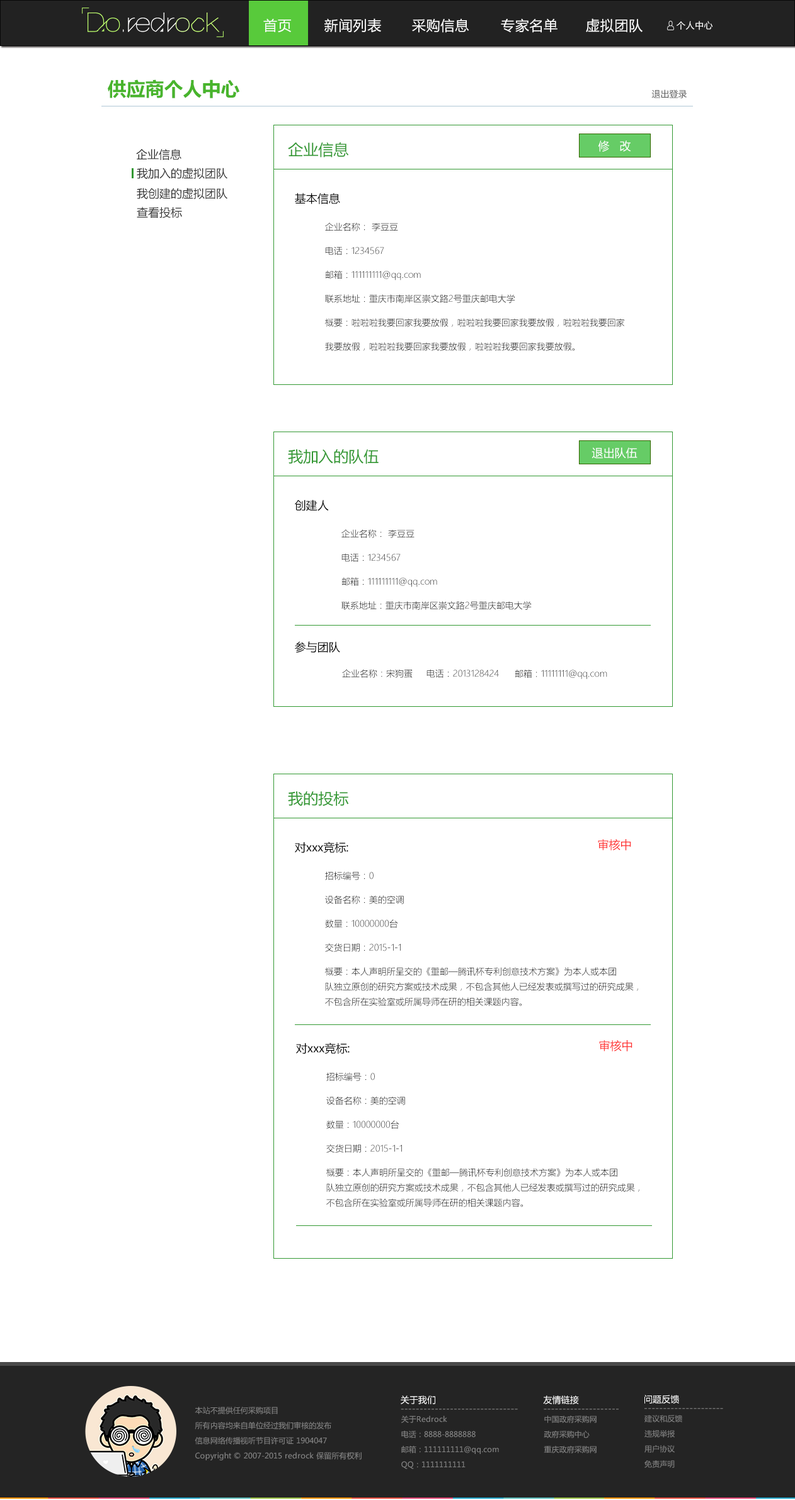
<style>
.page{position:relative;width:795px;height:1500px;background:#ffffff}
.page>*{position:absolute;margin:0}
.t1{font:13.9px "MicrosoftYaHei";letter-spacing:0.035em;color:#ffffff}
.t2{font:8.8px "MicrosoftYaHei";letter-spacing:0.035em;color:#ffffff}
.t3{font:18.9px "MicrosoftYaHei-Bold";color:#48b42c}
.t4{font:8.8px "MicrosoftYaHei";color:#5b5b5b}
.t5{font:11.3px "MicrosoftYaHei";color:#333333}
.t6{font:15.1px "MicrosoftYaHei";color:#339933}
.t7{font:11.3px "MicrosoftYaHei";color:#ffffff}
.t8{font:11.3px "MicrosoftYaHei";color:#000000}
.t9{font:8.8px/23.9px "MicrosoftYaHeiLight";color:#000000}
.t10{font:8.8px "MicrosoftYaHeiLight"}
.t11{font:11.3px "MicrosoftYaHei";color:#ff3333}
.t12{font:8.8px/15.1px "MicrosoftYaHeiLight";color:#000000}
.t13{font:8.8px "MicrosoftYaHei";color:#ffffff}
.t14{font:7.6px/15.1px "MicrosoftYaHei";color:#858585}
.t15{font:8.8px "MicrosoftYaHei";color:#858585}
</style>
<div class="page">
<p class="t1" style="left:263px;top:18px;width:28px;height:15px">首页</p>
<p class="t1" style="left:324px;top:18px;width:57px;height:15px">新闻列表</p>
<p class="t1" style="left:412px;top:18px;width:57px;height:15px">采购信息</p>
<p class="t1" style="left:501px;top:18px;width:57px;height:15px">专家名单</p>
<p class="t1" style="left:586px;top:18px;width:57px;height:15px">虚拟团队</p>
<p class="t2" style="left:677px;top:21px;width:36px;height:9px">个人中心</p>
<p class="t3" style="left:108px;top:79px;width:131px;height:19px">供应商个人中心</p>
<p class="t4" style="left:651px;top:89px;width:36px;height:9px">退出登录</p>
<p class="t5" style="left:136px;top:149px;width:45px;height:11px">企业信息</p>
<p class="t6" style="left:288px;top:142px;width:61px;height:15px">企业信息</p>
<p class="t7" style="left:598px;top:140px;width:33px;height:12px">修   改</p>
<p class="t5" style="left:137px;top:168px;width:90px;height:11px">我加入的虚拟团队</p>
<p class="t5" style="left:137px;top:188px;width:90px;height:11px">我创建的虚拟团队</p>
<p class="t8" style="left:295px;top:193px;width:45px;height:11px">基本信息</p>
<p class="t5" style="left:137px;top:207px;width:45px;height:11px">查看投标</p>
<p class="t9" style="left:325px;top:222px;width:299px;height:129px">企业名称： 李豆豆<br>电话：1234567<br>邮箱：111111111@qq.com<br>联系地址：重庆市南岸区崇文路2号重庆邮电大学<br>概要：啦啦啦我要回家我要放假，啦啦啦我要回家我要放假，啦啦啦我要回家<br>我要放假，啦啦啦我要回家我要放假，啦啦啦我要回家我要放假。</p>
<p class="t6" style="left:288px;top:449px;width:91px;height:15px">我加入的队伍</p>
<p class="t7" style="left:592px;top:447px;width:46px;height:12px">退出队伍</p>
<p class="t8" style="left:295px;top:500px;width:34px;height:11px">创建人</p>
<p class="t9" style="left:341px;top:529px;width:191px;height:81px">企业名称： 李豆豆<br>电话：1234567<br>邮箱：111111111@qq.com<br>联系地址：重庆市南岸区崇文路2号重庆邮电大学</p>
<p class="t8" style="left:295px;top:641px;width:45px;height:12px">参与团队</p>
<p class="t10" style="left:342px;top:669px;width:71px;height:9px">企业名称：宋狗蛋</p>
<p class="t10" style="left:426px;top:669px;width:73px;height:9px">电话：2013128424</p>
<p class="t10" style="left:515px;top:669px;width:92px;height:10px">邮箱：11111111@qq.com</p>
<p class="t6" style="left:288px;top:791px;width:61px;height:15px">我的投标</p>
<p class="t8" style="left:295px;top:842px;width:53px;height:11px">对xxx竞标:</p>
<p class="t11" style="left:598px;top:839px;width:33px;height:11px">审核中</p>
<p class="t12" style="left:325px;top:871px;width:313px;height:135px"><span class="t9">招标编号：0<br>设备名称：美的空调<br>数量：10000000台<br>交货日期：2015-1-1<br></span>概要：本人声明所呈交的《重邮—腾讯杯专利创意技术方案》为本人或本团<br>队独立原创的研究方案或技术成果，不包含其他人已经发表或撰写过的研究成果，<br>不包含所在实验室或所属导师在研的相关课题内容。</p>
<p class="t8" style="left:296px;top:1043px;width:54px;height:11px">对xxx竞标:</p>
<p class="t11" style="left:599px;top:1040px;width:33px;height:11px">审核中</p>
<p class="t12" style="left:326px;top:1072px;width:313px;height:135px"><span class="t9">招标编号：0<br>设备名称：美的空调<br>数量：10000000台<br>交货日期：2015-1-1<br></span>概要：本人声明所呈交的《重邮—腾讯杯专利创意技术方案》为本人或本团<br>队独立原创的研究方案或技术成果，不包含其他人已经发表或撰写过的研究成果，<br>不包含所在实验室或所属导师在研的相关课题内容。</p>
<p class="t13" style="left:401px;top:1395px;width:34px;height:9px">关于我们</p>
<p class="t13" style="left:543px;top:1395px;width:36px;height:9px">友情链接</p>
<p class="t13" style="left:644px;top:1395px;width:35px;height:9px">问题反馈</p>
<p class="t14" style="left:195px;top:1407px;width:167px;height:53px">本站不提供任何采购项目<br>所有内容均来自单位经过我们审核的发布<br>信息网络传播视听节目许可证 1904047<br>Copyright © 2007-2015 redrock 保留所有权利</p>
<p class="t15" style="left:401px;top:1409px;width:117px;height:1px">-------------------------------</p>
<p class="t15" style="left:544px;top:1409px;width:75px;height:1px">--------------------</p>
<p class="t15" style="left:644px;top:1408px;width:79px;height:1px">---------------------</p>
<p class="t14" style="left:401px;top:1416px;width:98px;height:53px">关于Redrock<br>电话：8888-8888888<br>邮箱：111111111@qq.com<br>QQ：1111111111</p>
<p class="t14" style="left:544px;top:1416px;width:53px;height:37px">中国政府采购网<br>政府采购中心<br>重庆政府采购网</p>
<p class="t14" style="left:644px;top:1415px;width:38px;height:53px">建议和反馈<br>违规举报<br>用户协议<br>免责声明</p>
</div>
